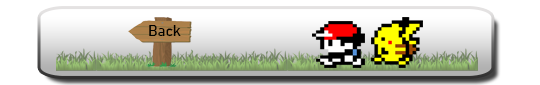
<style>
.page{position:relative;width:540px;height:85px;background:#ffffff}
.page>*{position:absolute;margin:0}
.t1{font:15px "Bahnschrift";color:#000000}
</style>
<div class="page">
<p class="t1" style="left:149px;top:25px;width:32px;height:12px">Back</p>
</div>
